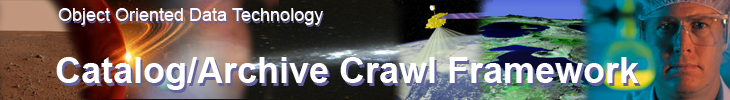
<style>
.page{position:relative;width:730px;height:100px}
.page>*{position:absolute;margin:0}
.t1{font:18px "ArialMT";color:#ffffff}
.t2{font:18px "ArialMT"}
.t3{font:36px "Arial-BoldMT";color:#ffffff}
.t4{font:36px "Arial-BoldMT"}
</style>
<div class="page">
<p class="t1" style="left:58px;top:8px;width:265px;height:17px">Object Oriented Data Technology</p>
<p class="t2" style="left:60px;top:9px;width:264px;height:18px">Object Oriented Data Technology</p>
<p class="t3" style="left:56px;top:57px;width:583px;height:33px">Catalog/Archive Crawl Framework</p>
<p class="t4" style="left:58px;top:60px;width:583px;height:33px">Catalog/Archive Crawl Framework</p>
</div>
